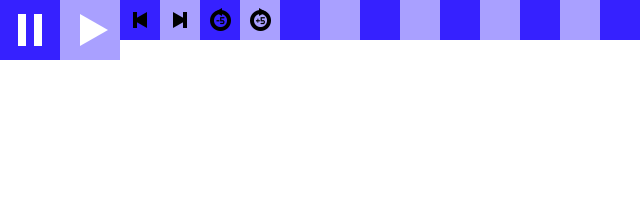
<style>
.page{position:relative;width:640px;height:200px;background:#ffffff}
.page>*{position:absolute;margin:0}
.t1{font:9.7px "AeroMaticsDisplayRegular";color:#000000}
</style>
<div class="page">
<p class="t1" style="left:216px;top:17px;width:9px;height:8px">-5</p>
<p class="t1" style="left:255px;top:17px;width:10px;height:8px">+5</p>
</div>
